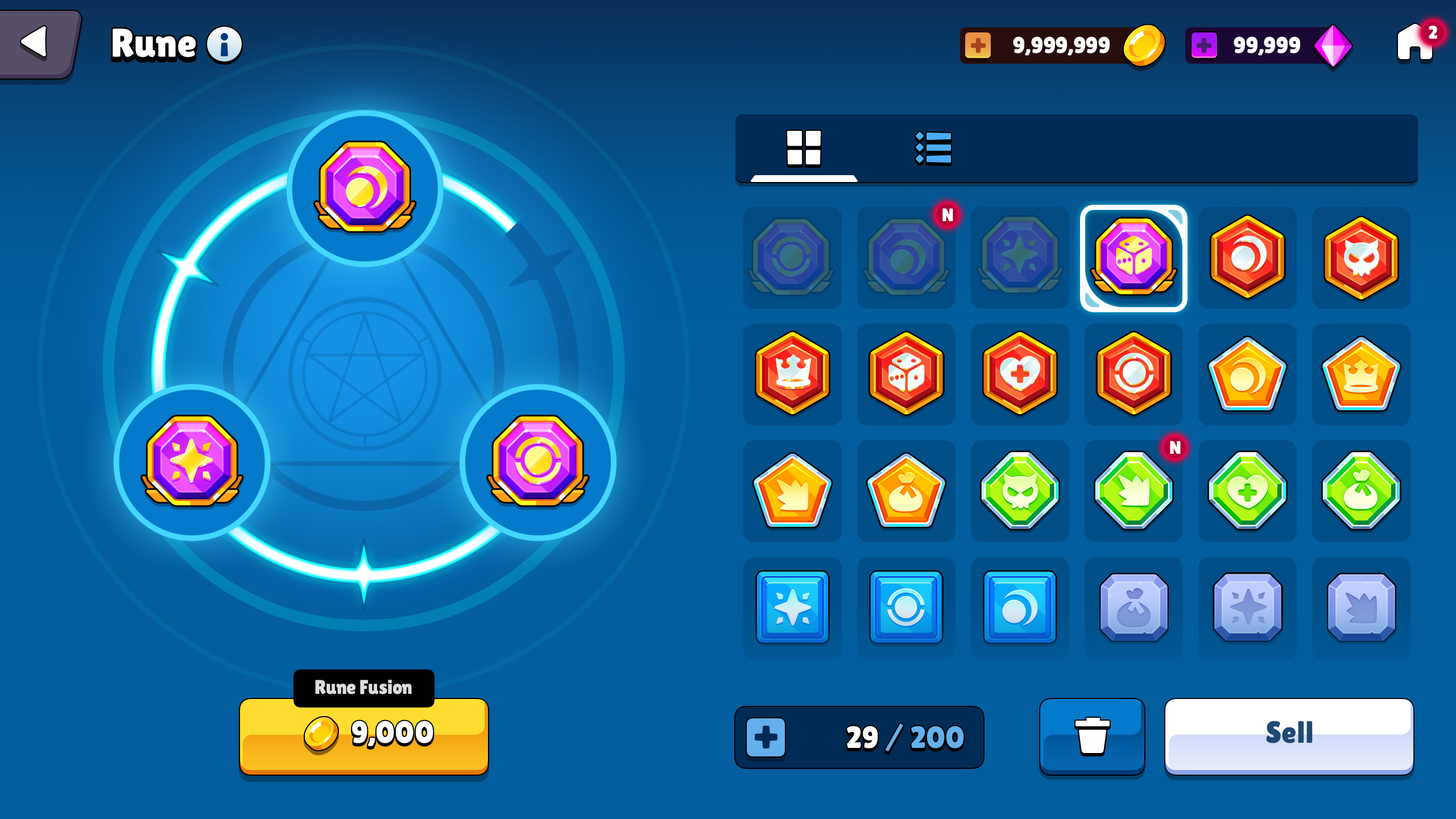
<style>
.page{position:relative;width:1456px;height:819px;background:#025e9e}
.page>*{position:absolute;margin:0}
.t1{font:39.8px "LilitaOne";color:#ffffff}
.t2{font:18.2px "LilitaOne";color:#ffffff;text-transform:uppercase}
.t3{font:22.7px "LilitaOne";letter-spacing:-0.01em;color:#ffffff;text-transform:uppercase}
.t4{font:19.7px "LilitaOne";color:#dddddd}
.t5{font:30.7px "LilitaOne";letter-spacing:0.02em;color:#ffffff}
.t6{font:30.7px "LilitaOne";letter-spacing:0.02em;color:#64b0ef}
.t7{font:30.7px "LilitaOne";letter-spacing:0.02em;color:#1e4a77}
</style>
<div class="page">
<p class="t1" style="left:113px;top:28px;width:83px;height:29px">Rune</p>
<p class="t2" style="left:1429px;top:26px;width:8px;height:13px">2</p>
<p class="t3" style="left:1013px;top:36px;width:97px;height:20px">9,999,999</p>
<p class="t3" style="left:1234px;top:36px;width:66px;height:20px">99,999</p>
<p class="t2" style="left:942px;top:208px;width:11px;height:13px">N</p>
<p class="t2" style="left:1170px;top:441px;width:11px;height:13px">N</p>
<p class="t4" style="left:315px;top:680px;width:97px;height:14px">Rune Fusion</p>
<p class="t5" style="left:352px;top:721px;width:81px;height:25px">9,000</p>
<p class="t6" style="left:847px;top:723px;width:117px;height:28px"><span class="t5">29 </span>/ 200</p>
<p class="t7" style="left:1266px;top:721px;width:47px;height:22px">Sell</p>
</div>
